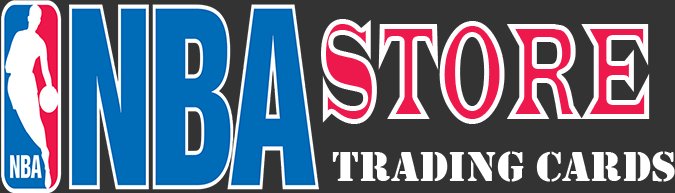
<style>
.page{position:relative;width:675px;height:193px;background:#333333}
.page>*{position:absolute;margin:0}
.t1{font:142.2px "LatinWide";letter-spacing:-0.02em;scale:0.36 1}
.t2{font:42.9px "Stencil";color:#ffffff;scale:1.05 1}
</style>
<div class="page">
<p class="t1" style="left:321px;top:19px;width:329px;height:105px">STORE</p>
<p class="t2" style="left:332px;top:151px;width:343px;height:31px">TRADING CARDS</p>
</div>
